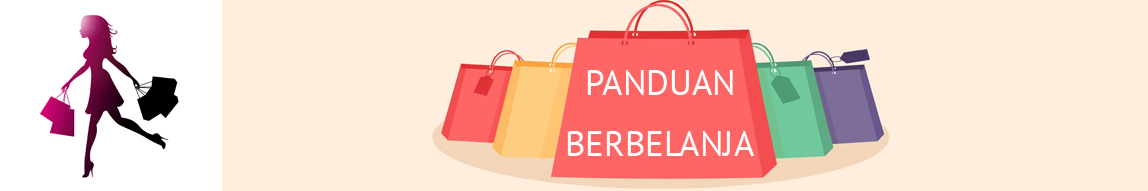
<style>
.page{position:relative;width:1148px;height:191px;background:#ffedde}
.page>*{position:absolute;margin:0}
.t1{font:35px "PTSans-Regular";color:#ffffff}
</style>
<div class="page">
<p class="t1" style="left:587px;top:70px;width:146px;height:25px">PANDUAN</p>
<p class="t1" style="left:567px;top:131px;width:188px;height:25px">BERBELANJA</p>
</div>
